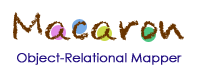
<style>
.page{position:relative;width:200px;height:80px;background:#ffffff}
.page>*{position:absolute;margin:0}
.t1{font:35.9px "CrayonAlphabet";color:#693400}
.t2{font:12.3px "CenturyGothic";color:#241183;font-weight:bold}
</style>
<div class="page">
<p class="t1" style="left:13px;top:12px;width:171px;height:29px">Macaron</p>
<p class="t2" style="left:17px;top:53px;width:165px;height:12px">Object-Relational Mapper</p>
</div>
